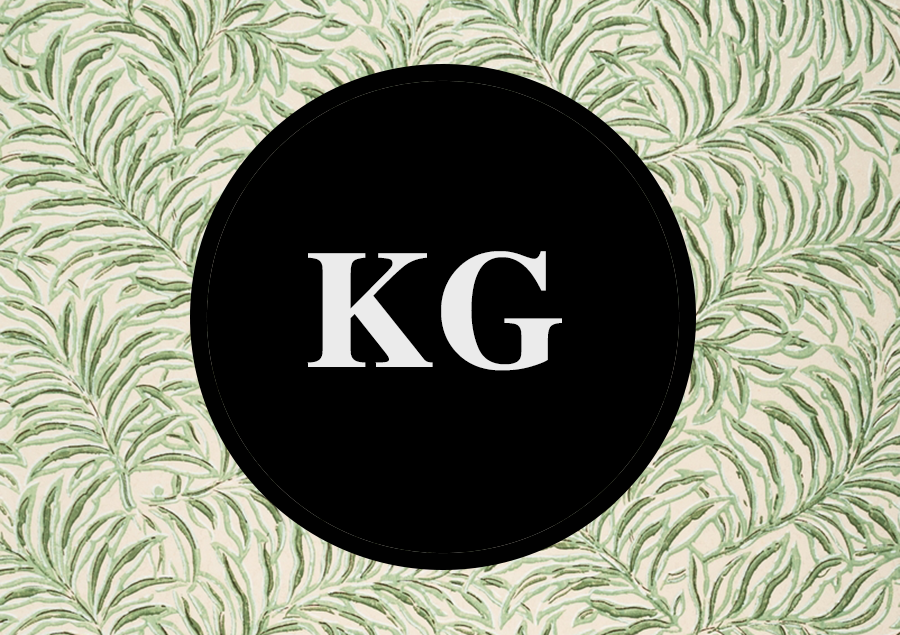
<style>
.page{position:relative;width:900px;height:635px;background:#000000}
.page>*{position:absolute;margin:0}
.t1{font:168.3px "Times-Bold";color:#ebebeb}
</style>
<div class="page">
<p class="t1" style="left:307px;top:251px;width:255px;height:120px">KG</p>
</div>
